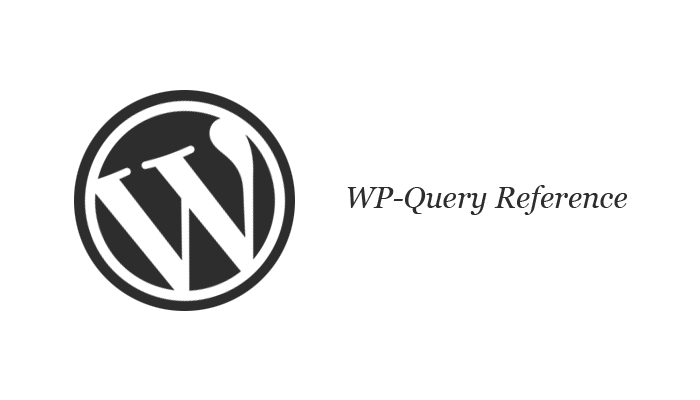
<style>
.page{position:relative;width:700px;height:400px;background:#ffffff}
.page>*{position:absolute;margin:0}
.t1{font:30px "Georgia-Italic";color:#2d2d2d}
</style>
<div class="page">
<p class="t1" style="left:347px;top:185px;width:280px;height:30px">WP-Query Reference</p>
</div>
